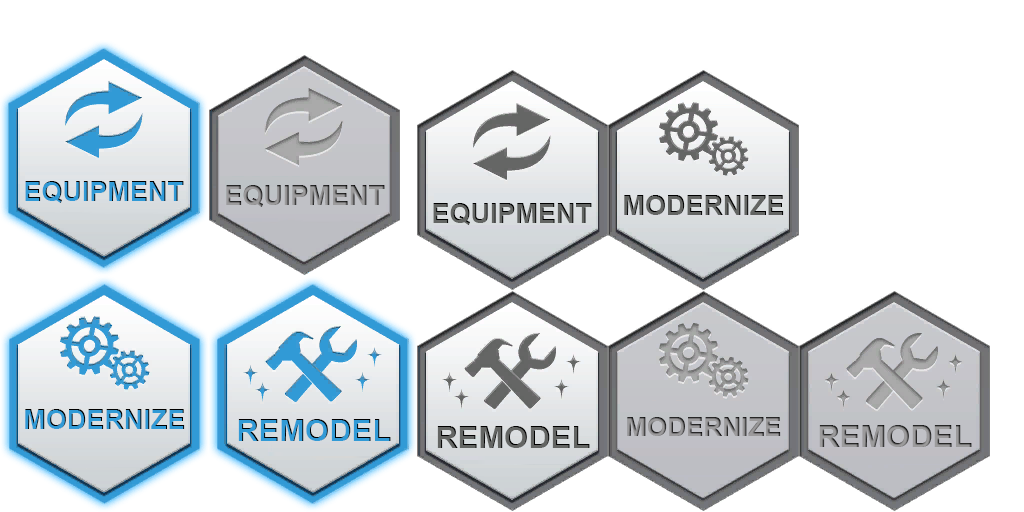
<style>
.page{position:relative;width:1024px;height:512px;background:#ffffff}
.page>*{position:absolute;margin:0}
.t1{font:27px "Arial-BoldMT"}
.t2{font:27px "Arial-BoldMT";color:#636563}
.t3{font:27px "Arial-BoldMT";color:#319ad6}
.t4{font:31px "Arial-BoldMT";color:#319ad6}
.t5{font:26px "Arial-BoldMT"}
.t6{font:31px "Arial-BoldMT"}
.t7{font:31px "Arial-BoldMT";color:#636563}
</style>
<div class="page">
<p class="t1" style="left:25px;top:181px;width:159px;height:22px">EQUIPMENT</p>
<p class="t1" style="left:226px;top:185px;width:159px;height:22px">EQUIPMENT</p>
<p class="t2" style="left:624px;top:195px;width:160px;height:20px">MODERNIZE</p>
<p class="t2" style="left:433px;top:203px;width:159px;height:22px">EQUIPMENT</p>
<p class="t3" style="left:25px;top:409px;width:160px;height:20px">MODERNIZE</p>
<p class="t4" style="left:238px;top:419px;width:153px;height:22px">REMODEL</p>
<p class="t5" style="left:627px;top:417px;width:154px;height:19px">MODERNIZE</p>
<p class="t6" style="left:819px;top:425px;width:153px;height:22px">REMODEL</p>
<p class="t7" style="left:437px;top:426px;width:153px;height:22px">REMODEL</p>
</div>
